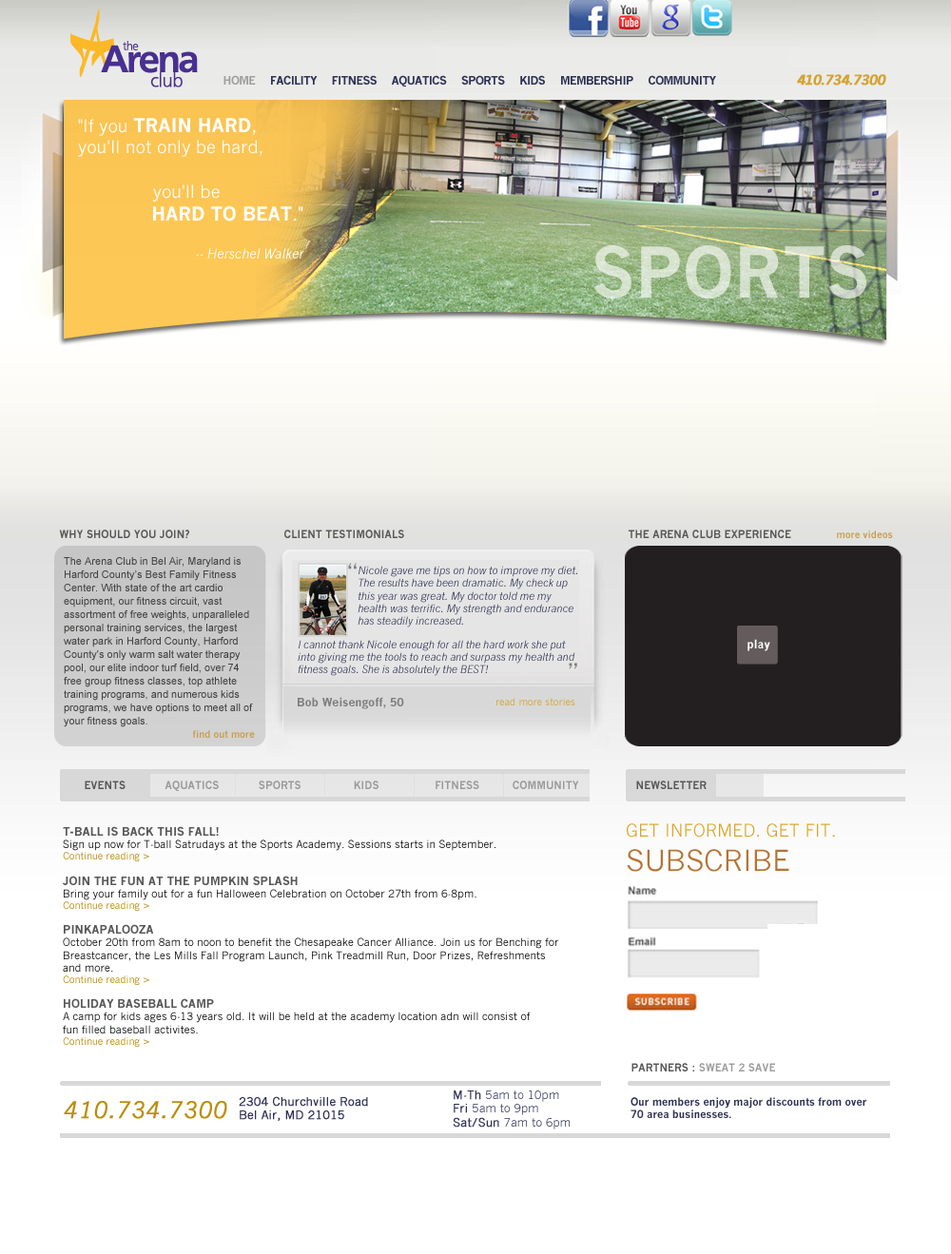
<style>
.page{position:relative;width:951px;height:1254px;background:#ffffff}
.page>*{position:absolute;margin:0}
.t1{font:11.4px "NewsGothicMT-Bold";letter-spacing:-0.05em;color:#2e3154}
.t2{font:11.4px "NewsGothicMT-Bold";letter-spacing:-0.05em;color:#9e9ea0}
.t3{font:13.3px "NewsGothicMT-Bold";letter-spacing:-0.05em;color:#d4a334;font-weight:bold;font-style:italic}
.t4{font:17.1px "NewsGothicMT";color:#ffffff}
.t5{font:18.7px "NewsGothicMT-Bold";color:#ffffff}
.t6{font:18.7px "NewsGothicMT";color:#ffffff}
.t7{font:13.3px "NewsGothicMT-Italic";color:#ffffff}
.t8{font:68.5px "NewsGothicMT-Bold";color:#d6e2cf}
.t9{font:10.5px "NewsGothicMT-Bold";color:#585757}
.t10{font:9.5px "NewsGothicMT-Bold";color:#c59d49}
.t11{font:10.5px/13.3px "ArialMT";color:#414140}
.t12{font:17.1px "NewsGothicMT-Bold";color:#7d7d7d}
.t13{font:10.5px "NewsGothicMT-Italic";color:#2e3154}
.t14{font:11.4px "NewsGothicMT-Bold";color:#ffffff}
.t15{font:11.4px "NewsGothicMT-Bold";color:#7d7d7d}
.t16{font:9.5px "NewsGothicMT";color:#d2a436}
.t17{font:10.5px "NewsGothicMT-Bold";color:#999999}
.t18{font:10.5px "NewsGothicMT";color:#040404}
.t19{font:11.4px "NewsGothicMT-Bold";color:#585757}
.t20{font:9.5px "NewsGothicMT";color:#b78a0b}
.t21{font:17.1px "NewsGothicMT";color:#d9a528}
.t22{font:28.5px "NewsGothicMT";color:#b57434}
.t23{font:10.5px "NewsGothicMT-Bold";color:#9e9d9e}
.t24{font:11.4px "NewsGothicMT";color:#2e3154;font-weight:bold}
.t25{font:11.4px "NewsGothicMT";color:#2e3154}
.t26{font:10.5px "NewsGothicMT-Bold";color:#2e3154}
.t27{font:22.8px "NewsGothicMT-Italic";color:#ba8d0b;font-weight:bold}
</style>
<div class="page">
<p class="t1" style="left:223px;top:74px;width:663px;height:13px"><span class="t2">HOME</span>     FACILITY     FITNESS     AQUATICS     SPORTS     KIDS     MEMBERSHIP     COMMUNITY                           <span class="t3">410.734.7300</span></p>
<p class="t4" style="left:78px;top:118px;width:226px;height:141px">"If you <span class="t5">TRAIN HARD</span><span class="t6">, </span>you'll not only be hard, <br><br>              you'll be  <span class="t5"> <br>HARD TO BEAT</span><span class="t6">."<br><br></span><span class="t7">-- Herschel Walker</span></p>
<p class="t8" style="left:593px;top:245px;width:273px;height:54px">SPORTS</p>
<p class="t9" style="left:59px;top:530px;width:130px;height:8px">WHY SHOULD YOU JOIN?</p>
<p class="t9" style="left:284px;top:530px;width:120px;height:8px">CLIENT TESTIMONIALS</p>
<p class="t9" style="left:628px;top:530px;width:163px;height:8px">THE ARENA CLUB EXPERIENCE</p>
<p class="t10" style="left:837px;top:531px;width:56px;height:7px">more videos</p>
<p class="t11" style="left:64px;top:557px;width:189px;height:170px">The Arena Club in Bel Air, Maryland is Harford County’s Best Family Fitness Center. With state of the art cardio equipment, our fitness circuit, vast assortment of free weights, unparalleled personal training services, the largest water park in Harford County, Harford County's only warm salt water therapy pool, our elite indoor turf field, over 74 free group fitness classes, top athlete training programs, and numerous kids programs, we have options to meet all of your fitness goals.</p>
<p class="t12" style="left:348px;top:563px;width:9px;height:7px">“</p>
<p class="t13" style="left:358px;top:566px;width:219px;height:62px">Nicole gave me tips on how to improve my diet. The results have been dramatic. My check up this year was great. My doctor told me my health was terrific. My strength and endurance has steadily increased.</p>
<p class="t13" style="left:298px;top:640px;width:277px;height:36px">I cannot thank Nicole enough for all the hard work she put into giving me the tools to reach and surpass my health and fitness goals. She is absolutely the BEST!</p>
<p class="t14" style="left:747px;top:639px;width:23px;height:12px">play</p>
<p class="t12" style="left:569px;top:663px;width:8px;height:6px">”</p>
<p class="t15" style="left:298px;top:697px;width:106px;height:12px">Bob Weisengoff, 50</p>
<p class="t16" style="left:496px;top:698px;width:79px;height:8px">read more stories</p>
<p class="t10" style="left:193px;top:730px;width:62px;height:8px">find out more</p>
<p class="t17" style="left:85px;top:781px;width:494px;height:10px"><span class="t9">EVENTS    </span>        AQUATICS            SPORTS                KIDS                 FITNESS          COMMUNITY</p>
<p class="t9" style="left:636px;top:781px;width:70px;height:8px">NEWSLETTER</p>
<p class="t18" style="left:63px;top:826px;width:496px;height:221px"><span class="t19">T-BALL IS BACK THIS FALL!<br></span>Sign up now for T-ball Satrudays at the Sports Academy. Sessions starts in September.<br><span class="t20">Continue reading &gt;<br><br></span><span class="t19">JOIN THE FUN AT THE PUMPKIN SPLASH<br></span>Bring your family out for a fun Halloween Celebration on October 27th from 6-8pm.<br><span class="t20">Continue reading &gt;<br><br></span><span class="t19">PINKAPALOOZA<br></span>October 20th from 8am to noon to benefit the Chesapeake Cancer Alliance. Join us for Benching for <br>Breastcancer, the Les Mills Fall Program Launch, Pink Treadmill Run, Door Prizes, Refreshments<br>and more.<br><span class="t20">Continue reading &gt;<br><br></span><span class="t19">HOLIDAY BASEBALL CAMP<br></span>A camp for kids ages 6-13 years old. It will be held at the academy location adn will consist of<br>fun filled baseball activites.<br><span class="t20">Continue reading &gt;</span></p>
<p class="t21" style="left:627px;top:823px;width:208px;height:49px">GET INFORMED. GET FIT.<br><span class="t22">SUBSCRIBE</span></p>
<p class="t23" style="left:631px;top:1063px;width:144px;height:9px"><span class="t9">PARTNERS : </span>SWEAT 2 SAVE</p>
<p class="t24" style="left:239px;top:1096px;width:129px;height:25px">2304 Churchville Road<br>Bel Air, MD 21015</p>
<p class="t25" style="left:453px;top:1091px;width:117px;height:39px"><span class="t24">M-Th </span>5am to 10pm<br><span class="t24">Fri </span>5am to 9pm<br><span class="t24">Sat/Sun </span>7am to 6pm</p>
<p class="t26" style="left:630px;top:1097px;width:236px;height:21px">Our members enjoy major discounts from over<br>70 area businesses.</p>
<p class="t27" style="left:64px;top:1101px;width:163px;height:18px">410.734.7300</p>
</div>
